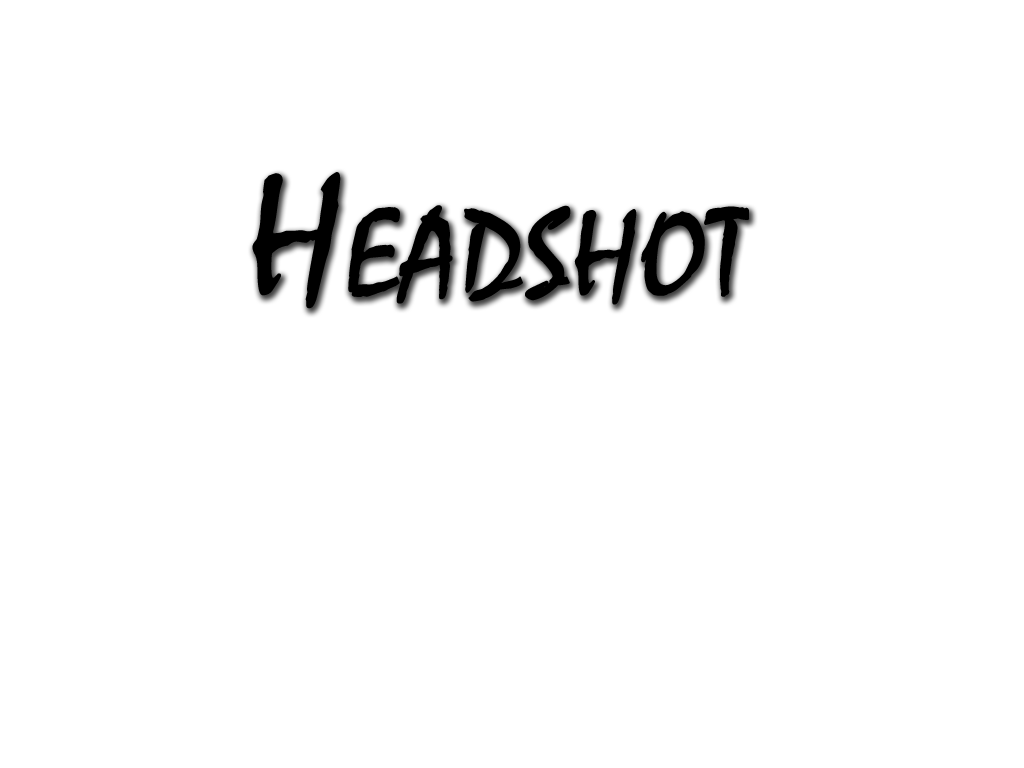
<style>
.page{position:relative;width:1024px;height:768px;background:#ffffff}
.page>*{position:absolute;margin:0}
.t1{font:180px "Mistral";color:#000000;font-variant:small-caps;font-weight:bold}
</style>
<div class="page">
<p class="t1" style="left:252px;top:172px;width:498px;height:137px">Headshot</p>
</div>
